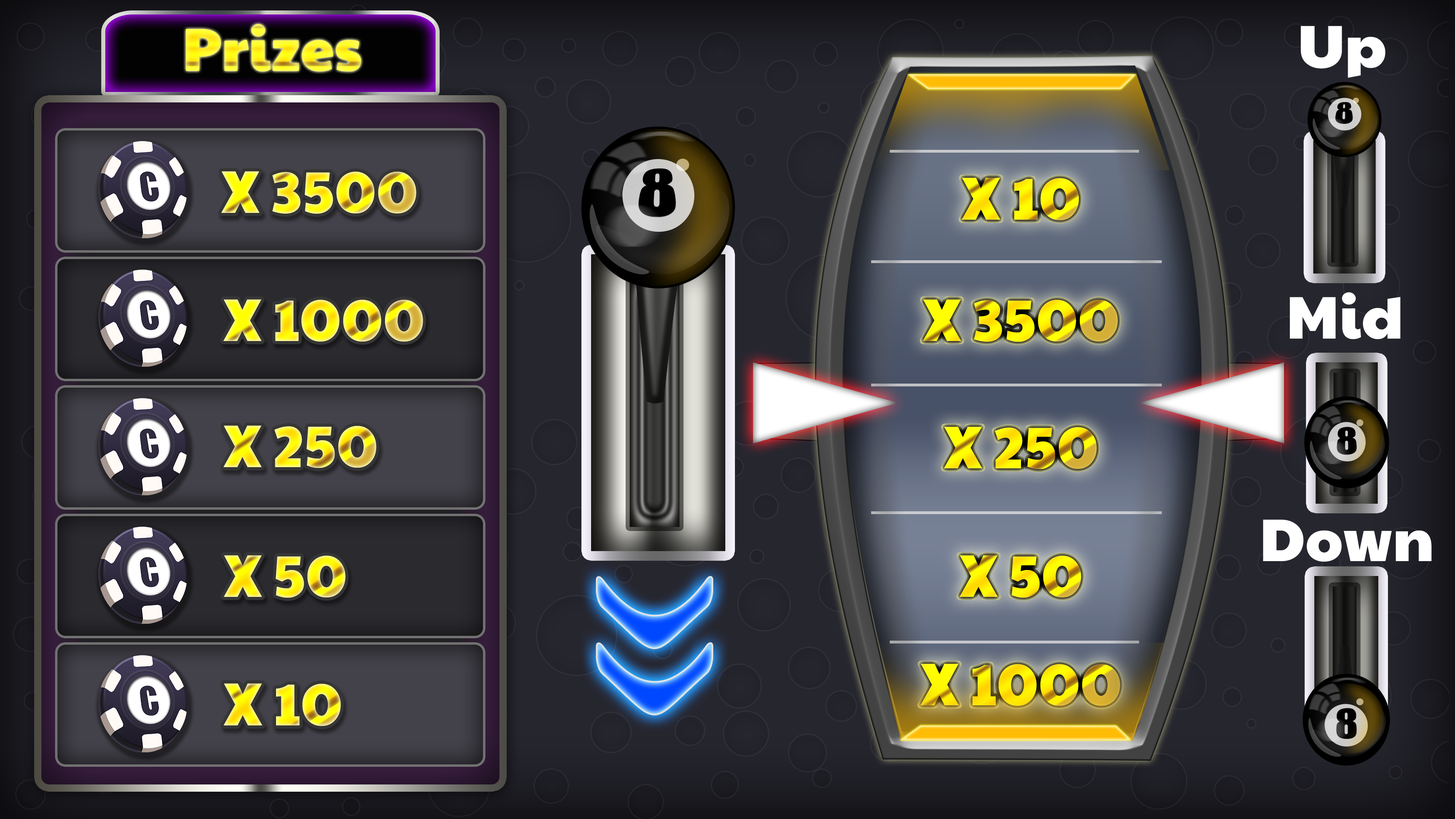
<style>
.page{position:relative;width:1455px;height:819px}
.page>*{position:absolute;margin:0}
.t1{font:60.9px "PaytoneOne"}
.t2{font:60.3px "PaytoneOne"}
</style>
<div class="page">
<p class="t1" style="left:186px;top:24px;width:175px;height:48px">Prizes</p>
<p class="t2" style="left:221px;top:171px;width:195px;height:43px">X 3500</p>
<p class="t1" style="left:962px;top:178px;width:117px;height:43px">X 10</p>
<p class="t2" style="left:223px;top:299px;width:200px;height:43px">X 1000</p>
<p class="t2" style="left:923px;top:299px;width:195px;height:43px">X 3500</p>
<p class="t2" style="left:223px;top:426px;width:154px;height:42px">X 250</p>
<p class="t2" style="left:944px;top:427px;width:153px;height:42px">X 250</p>
<p class="t2" style="left:224px;top:555px;width:122px;height:43px">X 50</p>
<p class="t2" style="left:960px;top:555px;width:121px;height:43px">X 50</p>
<p class="t2" style="left:921px;top:664px;width:199px;height:43px">X 1000</p>
<p class="t1" style="left:223px;top:684px;width:118px;height:43px">X 10</p>
</div>
